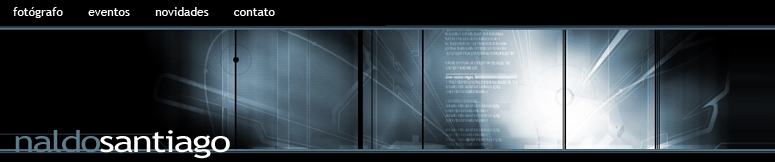
<style>
.page{position:relative;width:775px;height:162px;background:#000000}
.page>*{position:absolute;margin:0}
.t1{font:12px "TrebuchetMS";color:#ffffff}
.t2{font:30px "TrebuchetMS";letter-spacing:-0.05em;color:#ffffff;scale:1.3 1}
.t3{font:30px "TrebuchetMS";letter-spacing:-0.05em;color:#5f7c8c;scale:1.3 1}
</style>
<div class="page">
<p class="t1" style="left:13px;top:7px;width:262px;height:11px">fotógrafo       eventos       novidades       contato</p>
<p class="t2" style="left:15px;top:130px;width:215px;height:29px"><span class="t3">naldo</span>santiago</p>
</div>
